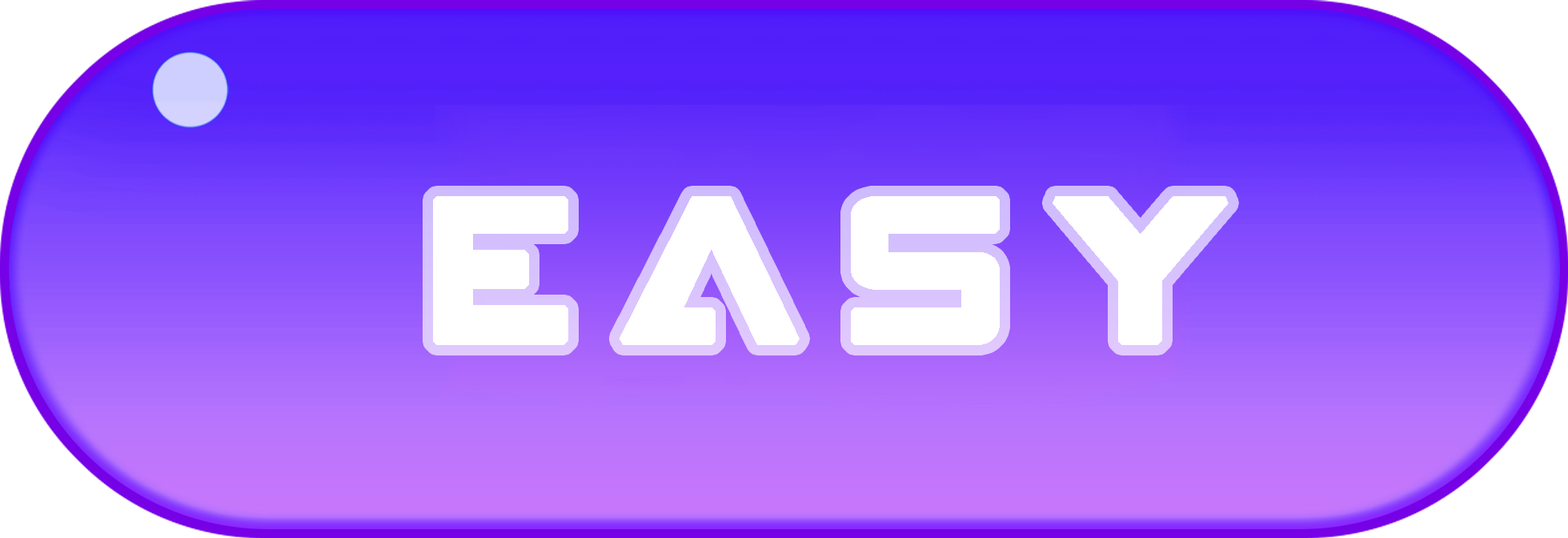
<style>
.page{position:relative;width:1568px;height:538px}
.page>*{position:absolute;margin:0}
.t1{font:175.4px "GAMECUBENDualSet";letter-spacing:0.2em;color:#ffffff;font-weight:bold;scale:0.85 1}
</style>
<div class="page">
<p class="t1" style="left:433px;top:196px;width:796px;height:149px">EASY</p>
</div>
